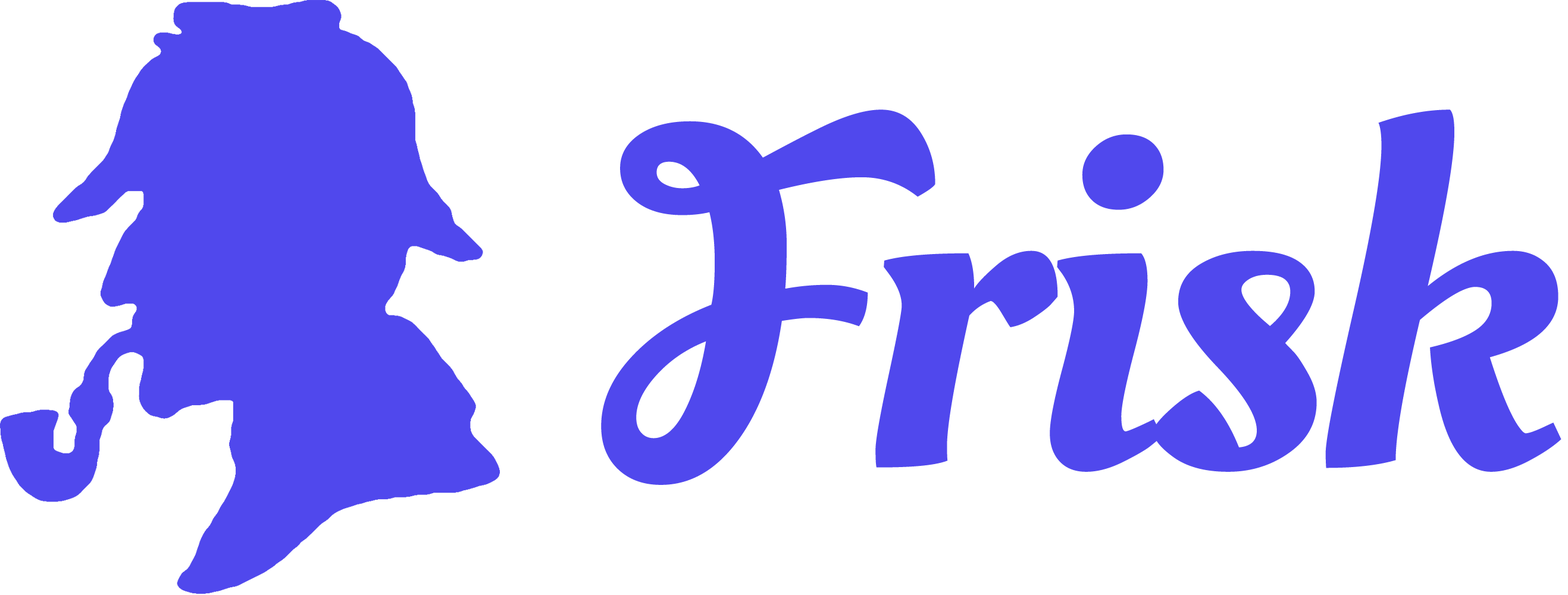
<style>
.page{position:relative;width:1568px;height:595px;background:#ffffff}
.page>*{position:absolute;margin:0}
.t1{font:485.2px "OleoScriptSwashCaps-Regular";letter-spacing:-0.025em;color:#5048ed}
.t2{font:485.2px "OleoScriptSwashCaps-Regular";letter-spacing:-0.05em;color:#5048ed}
.t3{font:485.2px "OleoScriptSwashCaps-Regular";color:#5048ed}
</style>
<div class="page">
<p class="t1" style="left:601px;top:109px;width:960px;height:376px"><span class="t2">F</span><span class="t3">r</span>isk</p>
</div>
